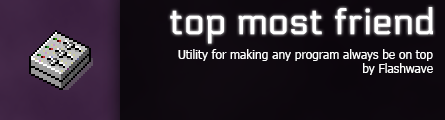
<style>
.page{position:relative;width:445px;height:120px}
.page>*{position:absolute;margin:0}
.t1{font:36px "Electrolize-Regular";color:#ffffff;font-weight:bold}
.t2{font:12px "Tahoma";color:#ffffff}
</style>
<div class="page">
<p class="t1" style="left:170px;top:7px;width:263px;height:37px">top most friend</p>
<p class="t2" style="left:178px;top:49px;width:255px;height:26px;text-align:right">Utility for making any program always be on top<br>by Flashwave</p>
</div>
